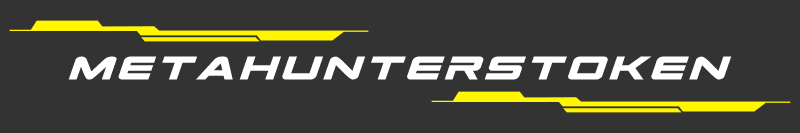
<style>
.page{position:relative;width:800px;height:133px;background:#333333}
.page>*{position:absolute;margin:0}
.t1{font:45.5px "SpaceRangerExpandedItalic";letter-spacing:0.1em;color:#ffffff}
</style>
<div class="page">
<p class="t1" style="left:68px;top:56px;width:664px;height:24px">MetaHuntersToken</p>
</div>
